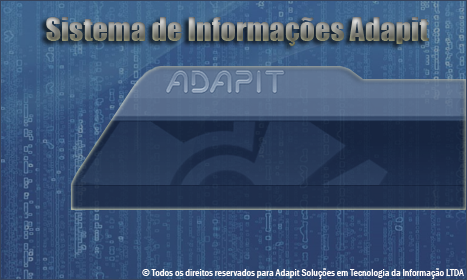
<style>
.page{position:relative;width:467px;height:280px}
.page>*{position:absolute;margin:0}
.t1{font:30px "Impact"}
.t2{font:10px "FranklinGothic-MediumCond";color:#fefbfa}
</style>
<div class="page">
<p class="t1" style="left:46px;top:17px;width:383px;height:29px">Sistema de Informações Adapit</p>
<p class="t2" style="left:142px;top:268px;width:322px;height:11px">© Todos os direitos reservados para Adapit Soluções em Tecnologia da Informação LTDA</p>
</div>
